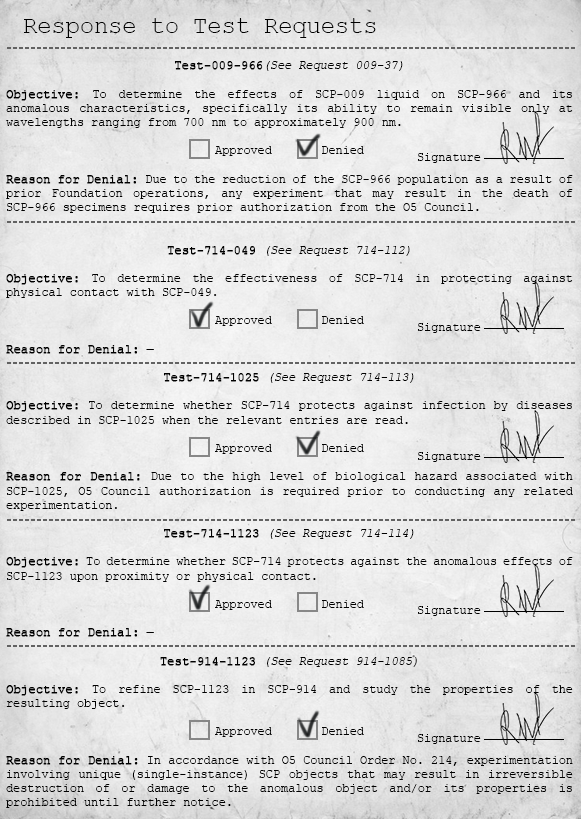
<style>
.page{position:relative;width:581px;height:819px}
.page>*{position:absolute;margin:0}
.t1{font:23.6px "CourierNewPSMT";color:#000000}
.t2{font:11.8px/14.2px "CourierNewPSMT";color:#000000}
.t3{font:14.2px "CourierNewPS-BoldMT";color:#000000;text-transform:uppercase}
.t4{font:11.8px "CourierNewPSMT";color:#000000;font-weight:bold}
.t5{font:11.8px "CourierNewPSMT";color:#000000;font-style:italic}
.t6{font:11.8px/14.2px "CourierNewPSMT";color:#000000;font-weight:bold}
.t7{font:11.8px/14.2px "CourierNewPSMT";color:#000000;font-style:italic}
.t8{font:11.8px "CourierNewPSMT";color:#000000}
</style>
<div class="page">
<p class="t1" style="left:24px;top:18px;width:352px;height:20px">Response to Test Requests</p>
<p class="t2" style="left:6px;top:61px;width:567px;height:747px;text-align:center"><span class="t3"><br><br><br></span><span class="t4">Test-009-966</span><span class="t5">(See Request 009-37)<br><br></span><span class="t6">Objective: </span>To determine the effects of SCP-009 liquid on SCP-966 and its anomalous characteristics, specifically its ability to remain visible only at wavelengths ranging from 700 nm to approximately 900 nm.<br><br>Approved       Denied<br><br><span class="t6">Reason for Denial: </span>Due to the reduction of the SCP-966 population as a result of prior Foundation operations, any experiment that may result in the death of SCP-966 specimens requires prior authorization from the O5 Council.<br><br><br><span class="t6">Test-714-049 </span><span class="t7">(See Request 714-112)<br><br></span><span class="t6">Objective:</span> To determine the effectiveness of SCP-714 in protecting against physical contact with SCP-049.<br><br>Approved       Denied<br><br><span class="t6">Reason for Denial:</span> —<br><br><span class="t6">Test-714-1025 </span><span class="t7">(See Request 714-113)<br><br></span><span class="t6">Objective:</span> To determine whether SCP-714 protects against infection by diseases described in SCP-1025 when the relevant entries are read.<br><br>Approved       Denied<br><br><span class="t6">Reason for Denial: </span>Due to the high level of biological hazard associated with SCP-1025, O5 Council authorization is required prior to conducting any related experimentation.<br><br><span class="t6">Test-714-1123 </span><span class="t7">(See Request 714-114)<br><br></span><span class="t6">Objective:</span> To determine whether SCP-714 protects against the anomalous effects of SCP-1123 upon proximity or physical contact.<br><br>Approved       Denied<br><br><span class="t6">Reason for Denial:</span> —<br><br><span class="t6">Test-914-1123 </span><span class="t7">(See Request 914-1085)<br><br></span><span class="t6">Objective:</span> To refine SCP-1123 in SCP-914 and study the properties of the resulting object.<br><br>Approved       Denied<br><br><span class="t6">Reason for Denial:</span> In accordance with O5 Council Order No. 214, experimentation involving unique (single-instance) SCP objects that may result in irreversible destruction of or damage to the anomalous object and/or its properties is prohibited until further notice.</p>
<p class="t8" style="left:418px;top:153px;width:63px;height:10px">Signature</p>
<p class="t8" style="left:418px;top:323px;width:63px;height:10px">Signature</p>
<p class="t8" style="left:418px;top:452px;width:63px;height:10px">Signature</p>
<p class="t8" style="left:418px;top:606px;width:63px;height:10px">Signature</p>
<p class="t8" style="left:418px;top:734px;width:63px;height:10px">Signature</p>
</div>
